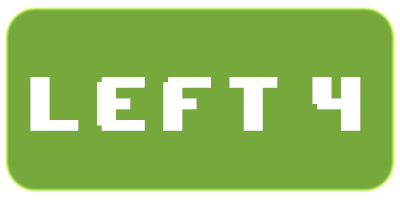
<style>
.page{position:relative;width:400px;height:200px;background:#76a83b}
.page>*{position:absolute;margin:0}
.t1{font:64.3px "8BITWONDERNominal";letter-spacing:0.16em;color:#ffffff;scale:0.89 1}
</style>
<div class="page">
<p class="t1" style="left:30px;top:77px;width:331px;height:54px">left 4</p>
</div>
